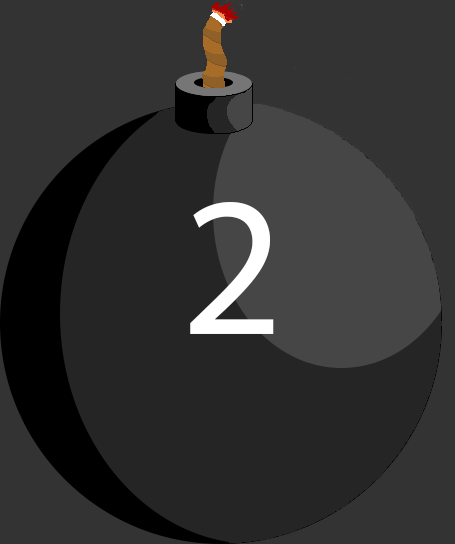
<style>
.page{position:relative;width:455px;height:544px;background:#333333}
.page>*{position:absolute;margin:0}
.t1{font:200px "MyriadPro-Regular";color:#ffffff}
</style>
<div class="page">
<p class="t1" style="left:190px;top:202px;width:84px;height:132px">2</p>
</div>
